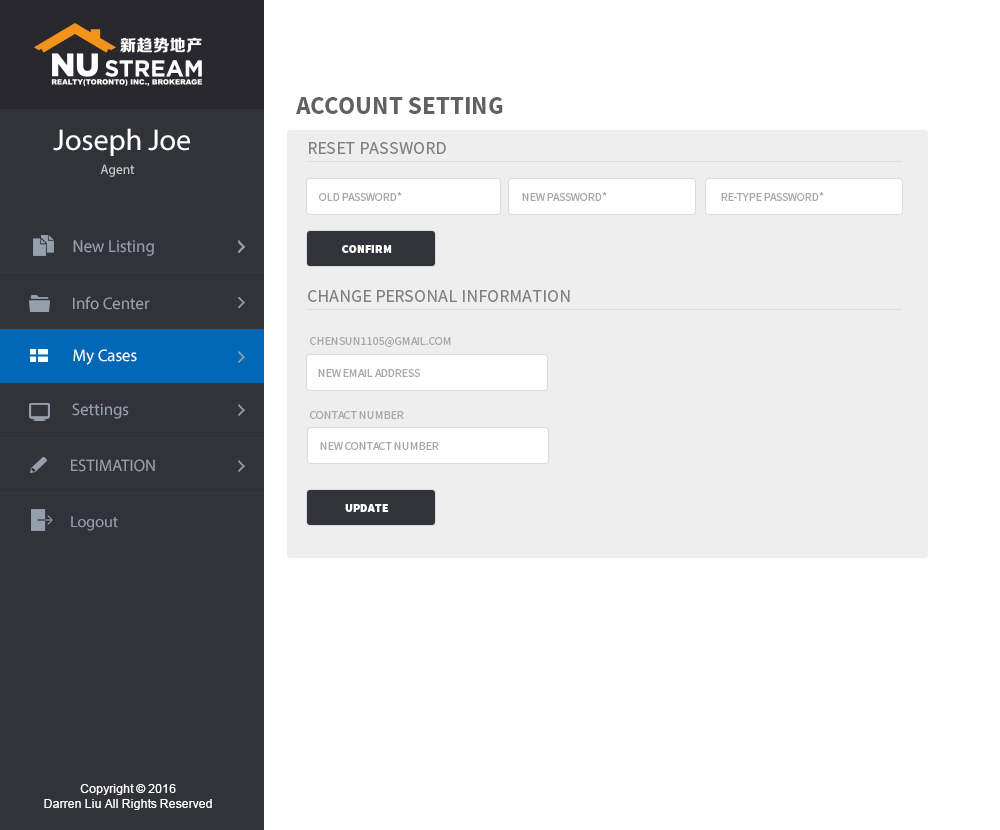
<style>
.page{position:relative;width:1000px;height:830px;background:#ffffff}
.page>*{position:absolute;margin:0}
.t1{font:25px "SourceSansPro-Bold";color:#616161}
.t2{font:30px "MyriadPro-Regular";color:#ffffff}
.t3{font:18px "SourceSansPro-Regular";color:#808080}
.t4{font:13.4px "MyriadPro-Regular";color:#cccccc}
.t5{font:12px "SourceSansPro-Regular";color:#a9a9a9}
.t6{font:17.6px "MyriadPro-Regular";color:#95a0aa;scale:0.96 1}
.t7{font:12px "SourceSansPro-Black";color:#ffffff}
.t8{font:16.8px "MyriadPro-Regular";color:#95a0aa}
.t9{font:16.8px "MyriadPro-Regular";color:#ffffff}
.t10{font:16px "MyriadPro-Regular";color:#95a0aa}
.t11{font:12px "ArialMT";color:#ffffff}
</style>
<div class="page">
<p class="t1" style="left:296px;top:97px;width:207px;height:17px">ACCOUNT SETTING</p>
<p class="t2" style="left:53px;top:128px;width:137px;height:28px">Joseph Joe</p>
<p class="t3" style="left:309px;top:142px;width:137px;height:12px">RESET PASSWORD</p>
<p class="t4" style="left:100px;top:164px;width:35px;height:13px">Agent</p>
<p class="t5" style="left:319px;top:192px;width:83px;height:9px">OLD PASSWORD*</p>
<p class="t5" style="left:522px;top:192px;width:85px;height:9px">NEW PASSWORD*</p>
<p class="t5" style="left:721px;top:192px;width:103px;height:9px">RE-TYPE PASSWORD*</p>
<p class="t6" style="left:73px;top:240px;width:81px;height:16px">New Listing</p>
<p class="t7" style="left:342px;top:245px;width:50px;height:8px">CONFIRM</p>
<p class="t3" style="left:308px;top:290px;width:262px;height:12px">CHANGE PERSONAL INFORMATION</p>
<p class="t8" style="left:73px;top:296px;width:77px;height:14px">Info Center</p>
<p class="t5" style="left:310px;top:337px;width:141px;height:10px">CHENSUN1105@GMAIL.COM</p>
<p class="t9" style="left:73px;top:349px;width:64px;height:16px">My Cases</p>
<p class="t5" style="left:318px;top:369px;width:102px;height:8px">NEW EMAIL ADDRESS</p>
<p class="t8" style="left:72px;top:403px;width:57px;height:16px">Settings</p>
<p class="t5" style="left:310px;top:411px;width:94px;height:8px">CONTACT NUMBER</p>
<p class="t5" style="left:320px;top:442px;width:119px;height:8px">NEW CONTACT NUMBER</p>
<p class="t8" style="left:71px;top:459px;width:84px;height:13px">ESTIMATION</p>
<p class="t7" style="left:345px;top:504px;width:44px;height:8px">UPDATE</p>
<p class="t10" style="left:71px;top:516px;width:47px;height:15px">Logout</p>
<p class="t11" style="left:44px;top:784px;width:168px;height:26px;text-align:center">Copyright © 2016<br>Darren Liu All Rights Reserved</p>
</div>
